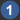
<style>
.page{position:relative;width:20px;height:20px;background:#3b5f97}
.page>*{position:absolute;margin:0}
.t1{font:14px "Arial-BoldMT";letter-spacing:0.025em;color:#fcfdfd}
</style>
<div class="page">
<p class="t1" style="left:6px;top:5px;width:6px;height:10px">1</p>
</div>
